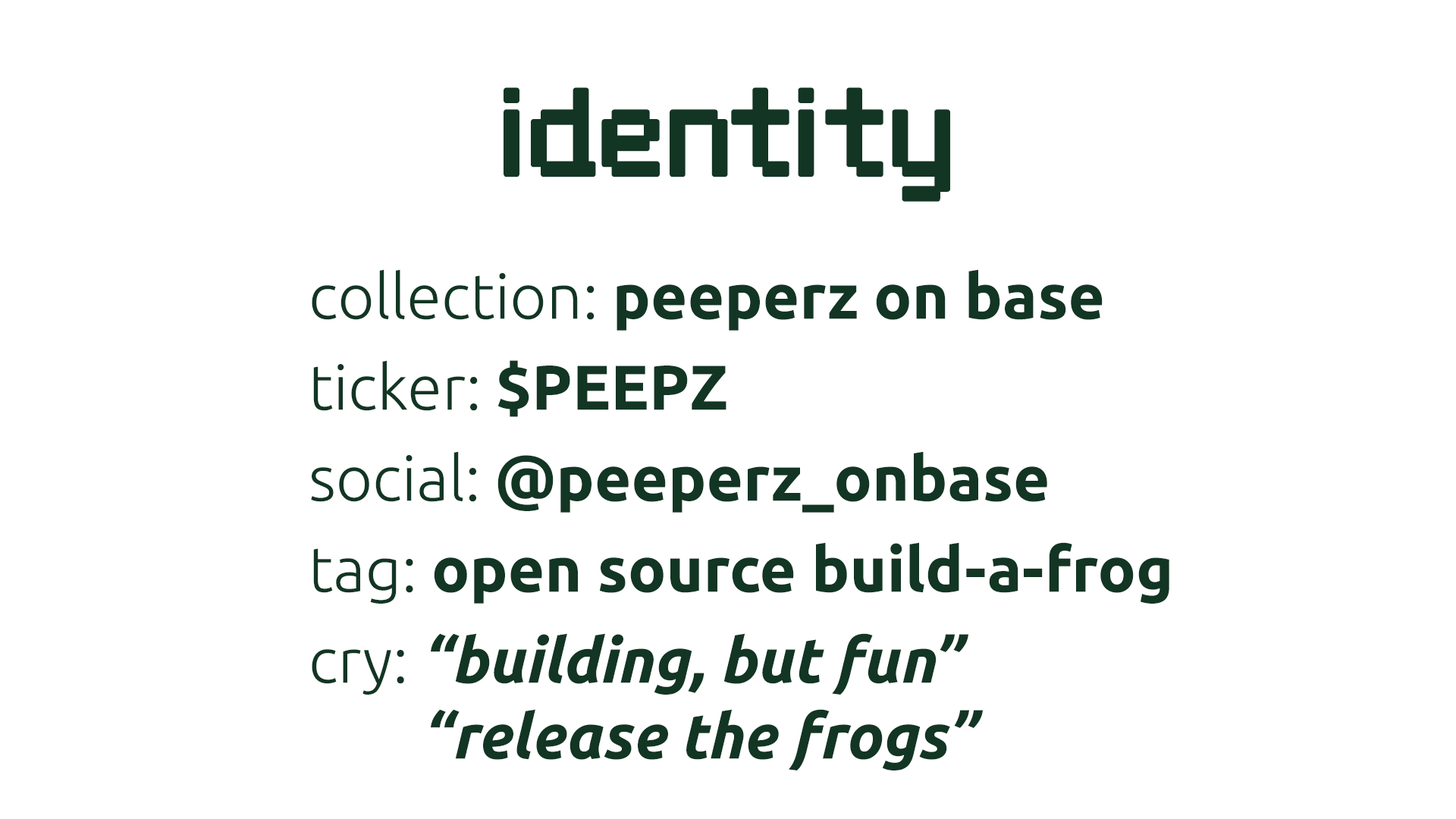
<style>
.page{position:relative;width:1456px;height:819px;background:#ffffff}
.page>*{position:absolute;margin:0}
.t1{font:113.7px "Wellbutrin";color:#123524}
.t2{font:63.2px "Ubuntu-Bold";color:#123524}
.t3{font:63.2px "Ubuntu-Light";color:#123524}
.t4{font:63.2px "Ubuntu-BoldItalic";color:#123524}
.t5{font:63.2px "Ubuntu-Light";color:#ffffff}
</style>
<div class="page">
<p class="t1" style="left:504px;top:87px;width:446px;height:115px">identity</p>
<p class="t2" style="left:311px;top:269px;width:858px;height:501px"><span class="t3">collection: </span>peeperz on base<br><br><span class="t3">ticker: </span>$PEEPZ<br><br><span class="t3">social: </span>@peeperz_onbase<br><br><span class="t3">tag: </span>open source build-a-frog<br><br><span class="t3">cry: </span><span class="t4">“building, but fun”<br></span><span class="t5">cry: </span><span class="t4">“release the frogs”</span></p>
</div>
